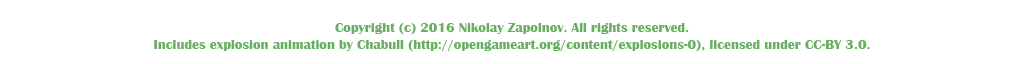
<style>
.page{position:relative;width:1024px;height:64px;background:#ffffff}
.page>*{position:absolute;margin:0}
.t1{font:14px "BritannicBold";color:#68af62}
</style>
<div class="page">
<p class="t1" style="left:154px;top:22px;width:716px;height:30px;text-align:center">Copyright (c) 2016 Nikolay Zapolnov. All rights reserved.<br>Includes explosion animation by Chabull (http://opengameart.org/content/explosions-0), licensed under CC-BY 3.0.</p>
</div>
